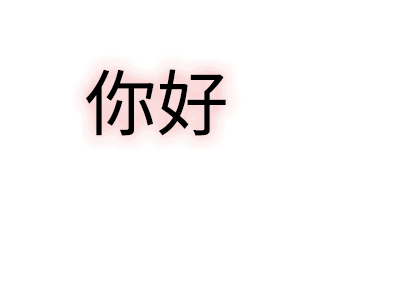
<style>
.page{position:relative;width:400px;height:300px;background:#ffffff}
.page>*{position:absolute;margin:0}
.t1{font:72px "SourceHanSansSC-Regular";color:#000000}
</style>
<div class="page">
<p class="t1" style="left:86px;top:69px;width:140px;height:67px">你好</p>
</div>
